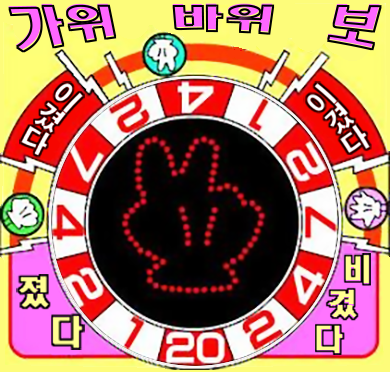
<style>
.page{position:relative;width:390px;height:372px}
.page>*{position:absolute;margin:0}
.t1{font:52.8px "HeadlineR-HM";color:#ff66ff}
.t2{font:25px "H2gtrE";color:#ffffff}
.t3{font:29.1px "HeadlineR-HM";color:#fffe92}
.t4{font:33.3px "HeadlineR-HM";color:#fffe92}
</style>
<div class="page">
<p class="t1" style="left:8px;top:3px;width:372px;height:47px">가위  바위  보</p>
<p class="t2" style="left:21px;top:83px;width:62px;height:73px;rotate:36deg">이겼다</p>
<p class="t2" style="left:307px;top:83px;width:63px;height:70px;rotate:-40deg">이겼다</p>
<p class="t3" style="left:315px;top:255px;width:54px;height:98px">비<br> 겼<br>다</p>
<p class="t4" style="left:18px;top:276px;width:64px;height:72px">졌<br>  다</p>
</div>
